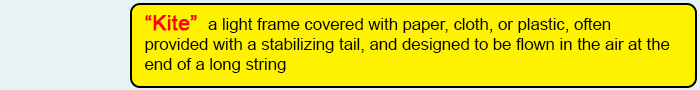
<style>
.page{position:relative;width:700px;height:90px;background:#fff200}
.page>*{position:absolute;margin:0}
.t1{font:16.7px "ArialMT";color:#020202}
.t2{font:20.8px "ArialMT";color:#fd010d;font-weight:bold}
</style>
<div class="page">
<p class="t1" style="left:145px;top:15px;width:525px;height:58px"><span class="t2">“Kite” </span> a light frame covered with paper, cloth, or plastic, often <br>provided with a stabilizing tail, and designed to be flown in the air at the <br>end of a long string</p>
</div>
